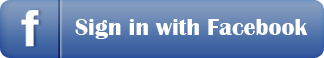
<style>
.page{position:relative;width:324px;height:58px}
.page>*{position:absolute;margin:0}
.t1{font:24px "BritannicBold";color:#ffffff}
</style>
<div class="page">
<p class="t1" style="left:75px;top:18px;width:233px;height:21px">Sign in with Facebook</p>
</div>
